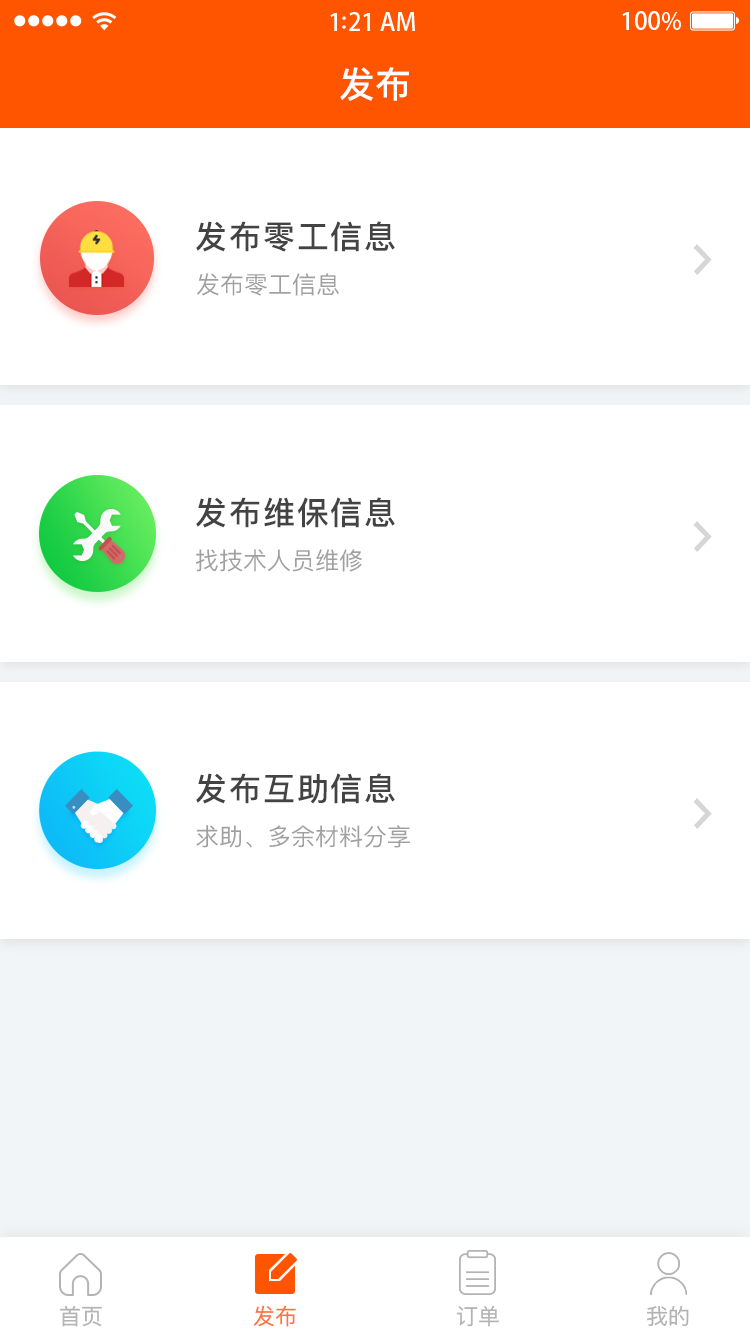
<style>
.page{position:relative;width:750px;height:1334px;background:#ffffff}
.page>*{position:absolute;margin:0}
.t1{font:36px "PingFangSC-Medium";color:#ffffff}
.t2{font:32px "PingFangSC-Medium";letter-spacing:0.06em;color:#434343}
.t3{font:24px "PingFangSC-Regular";color:#a0a0a0}
.t4{font:22px "PingFangSC-Regular";color:#b4b4b4}
.t5{font:22px "PingFangSC-Regular";color:#ff7342}
</style>
<div class="page">
<p class="t1" style="left:340px;top:67px;width:69px;height:34px">发布</p>
<p class="t2" style="left:196px;top:221px;width:199px;height:31px">发布零工信息</p>
<p class="t3" style="left:197px;top:273px;width:142px;height:23px">发布零工信息</p>
<p class="t2" style="left:196px;top:497px;width:199px;height:31px">发布维保信息</p>
<p class="t3" style="left:196px;top:549px;width:166px;height:23px">找技术人员维修</p>
<p class="t2" style="left:196px;top:773px;width:199px;height:31px">发布互助信息</p>
<p class="t3" style="left:196px;top:825px;width:214px;height:23px">求助、多余材料分享</p>
<p class="t4" style="left:60px;top:1305px;width:42px;height:22px">首页</p>
<p class="t5" style="left:253px;top:1305px;width:43px;height:22px">发布</p>
<p class="t4" style="left:456px;top:1305px;width:43px;height:22px">订单</p>
<p class="t4" style="left:647px;top:1305px;width:42px;height:21px">我的</p>
</div>
